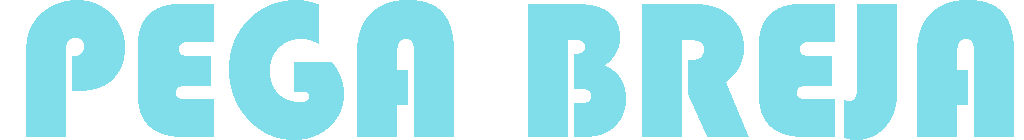
<style>
.page{position:relative;width:1024px;height:140px;background:#80deea}
.page>*{position:absolute;margin:0}
.t1{font:200px "Bauhaus93";color:#80deea}
</style>
<div class="page">
<p class="t1" style="left:26px;top:0px;width:988px;height:140px">PEGA BREJA</p>
</div>
